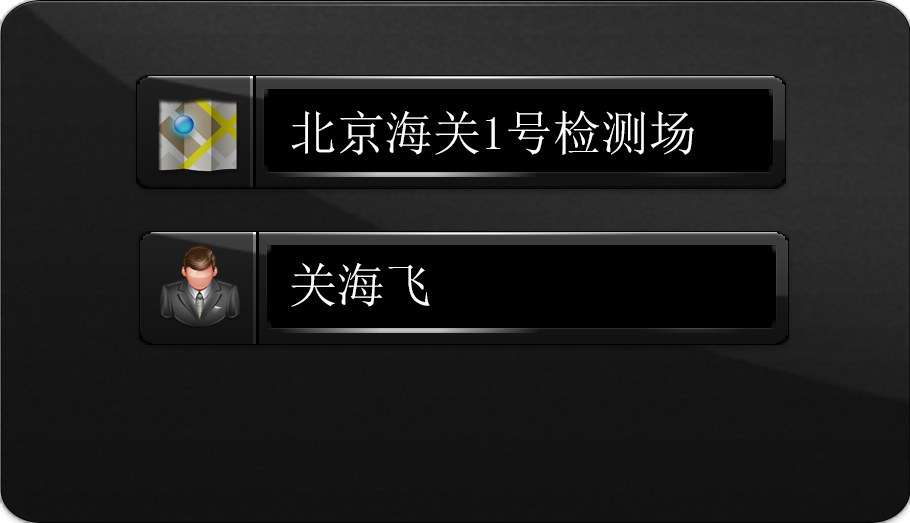
<style>
.page{position:relative;width:910px;height:523px}
.page>*{position:absolute;margin:0}
.t1{font:48px "SimSun";color:#ffffff}
</style>
<div class="page">
<p class="t1" style="left:291px;top:110px;width:403px;height:45px">北京海关1号检测场</p>
<p class="t1" style="left:291px;top:263px;width:139px;height:44px">关海飞</p>
</div>
